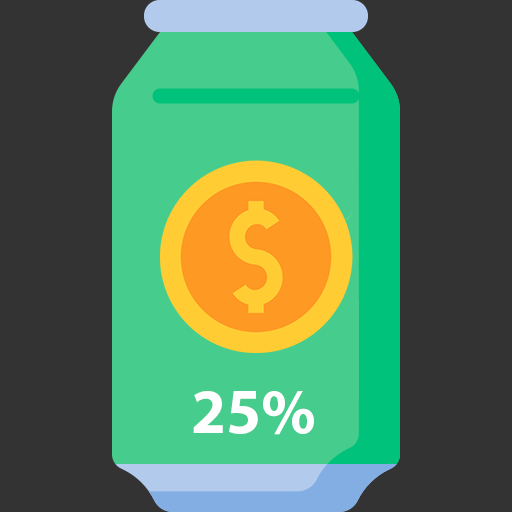
<style>
.page{position:relative;width:512px;height:512px;background:#333333}
.page>*{position:absolute;margin:0}
.t1{font:62.8px "MyriadPro-Bold";color:#ffffff}
</style>
<div class="page">
<p class="t1" style="left:193px;top:391px;width:121px;height:44px">25%</p>
</div>
